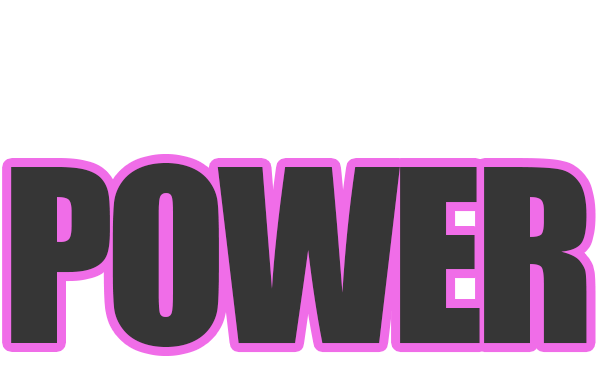
<style>
.page{position:relative;width:596px;height:377px;background:#ffffff}
.page>*{position:absolute;margin:0}
.t1{font:223.5px "Impact";letter-spacing:-0.04em;color:#363636}
</style>
<div class="page">
<p class="t1" style="left:11px;top:163px;width:576px;height:184px">POWER</p>
</div>
